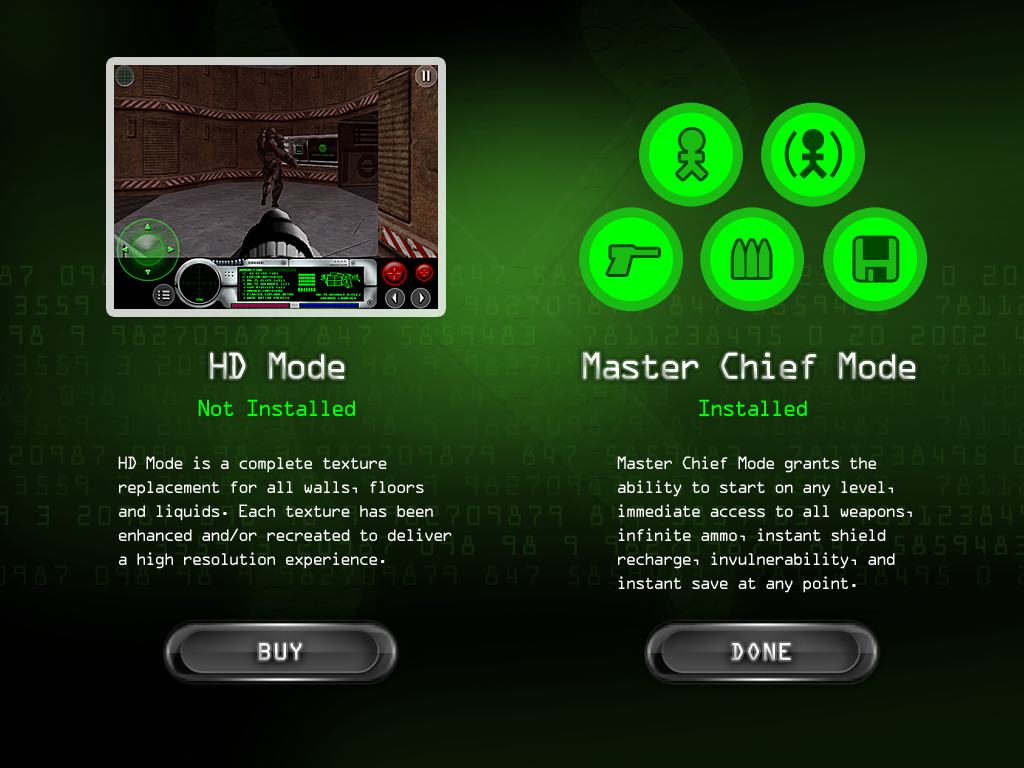
<style>
.page{position:relative;width:1024px;height:768px}
.page>*{position:absolute;margin:0}
.t1{font:34px "OCRAStd";letter-spacing:-0.14em}
.t2{font:34px "OCRAStd";letter-spacing:-0.14em;color:#fefefe}
.t3{font:21px "OCRAStd";letter-spacing:-0.14em;color:#00ff00}
.t4{font:16px/24px "OCRAStd";letter-spacing:-0.14em;color:#fefefe}
.t5{font:22px "OCRAStd";color:#ffffff}
</style>
<div class="page">
<p class="t1" style="left:210px;top:352px;width:135px;height:27px">HD Mode</p>
<p class="t2" style="left:583px;top:352px;width:333px;height:27px">Master Chief Mode</p>
<p class="t3" style="left:198px;top:399px;width:157px;height:17px">Not Installed</p>
<p class="t3" style="left:699px;top:399px;width:108px;height:17px">Installed</p>
<p class="t4" style="left:118px;top:456px;width:334px;height:113px">HD Mode is a complete texture replacement for all walls, floors and liquids. Each texture has been enhanced and/or recreated to deliver a high resolution experience.</p>
<p class="t4" style="left:617px;top:456px;width:295px;height:137px">Master Chief Mode grants the ability to start on any level, immediate access to all weapons, infinite ammo, instant shield recharge, invulnerability, and instant save at any point.</p>
<p class="t5" style="left:259px;top:643px;width:43px;height:17px">BUY</p>
<p class="t5" style="left:732px;top:643px;width:59px;height:17px">DONE</p>
</div>
